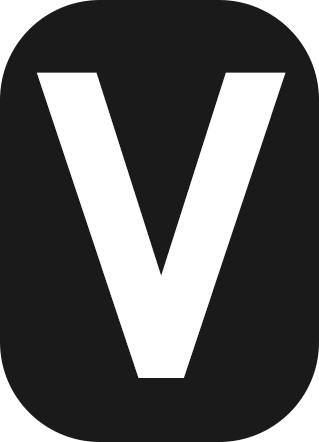
<style>
.page{position:relative;width:319px;height:442px;background:#1a1a1a}
.page>*{position:absolute;margin:0}
.t1{font:429.9px "Bahnschrift-Bold";color:#ffffff}
</style>
<div class="page">
<p class="t1" style="left:37px;top:72px;width:249px;height:306px">V</p>
</div>
